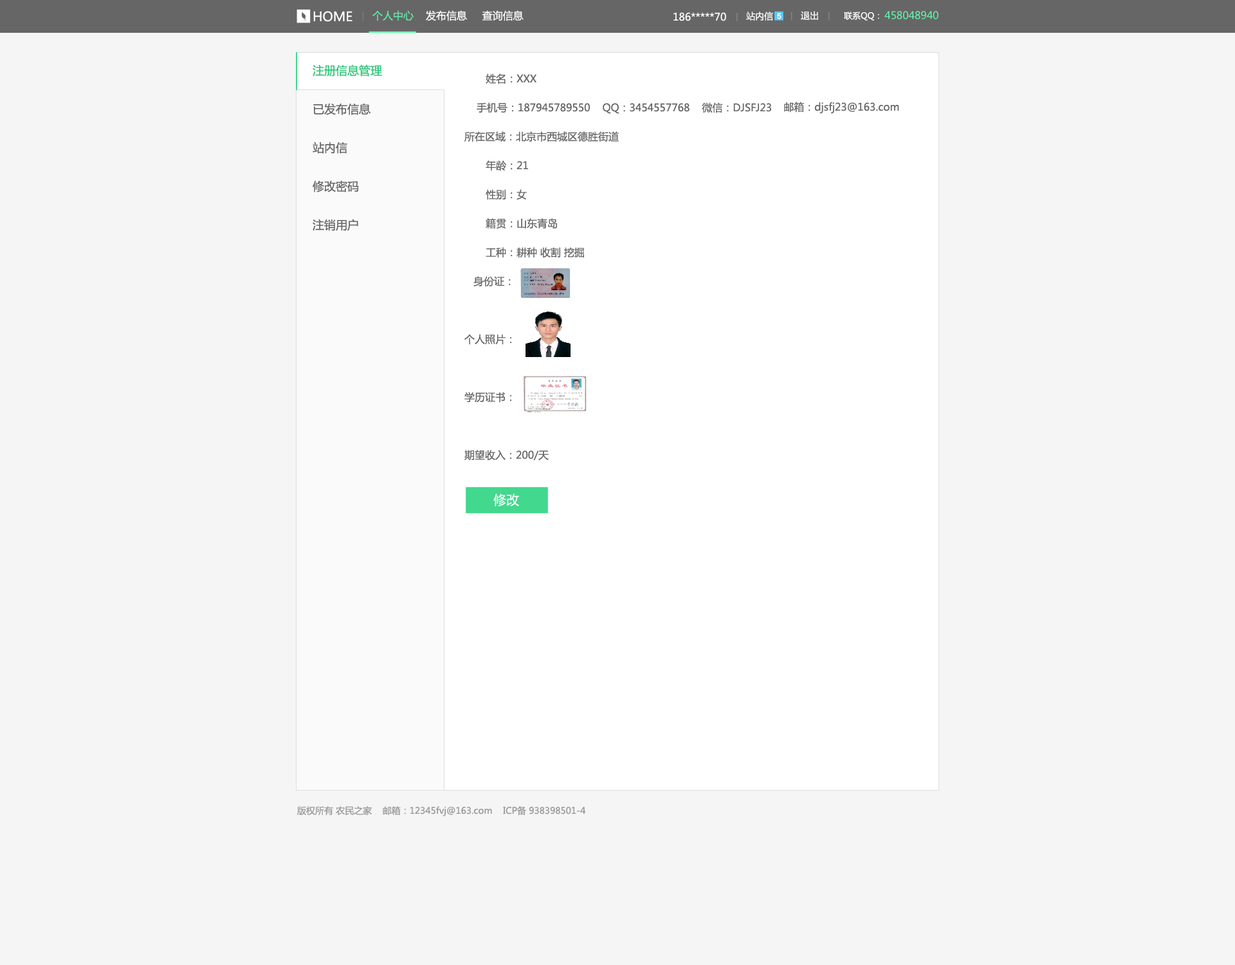
<style>
.page{position:relative;width:1235px;height:965px;background:#f5f5f5}
.page>*{position:absolute;margin:0}
.t1{font:12.9px "MicrosoftYaHei";color:#ffffff;text-transform:uppercase}
.t2{font:10.3px "MicrosoftYaHei";color:#ffffff;text-transform:uppercase}
.t3{font:10.3px "MicrosoftYaHei";color:#61eba6;text-transform:uppercase}
.t4{font:9px "MicrosoftYaHei";color:#ffffff;text-transform:uppercase}
.t5{font:7.7px "ArialMT";color:#ffffff;text-transform:uppercase;font-weight:bold}
.t6{font:8.4px "MicrosoftYaHei";color:#ffffff;text-transform:uppercase}
.t7{font:10.3px "MicrosoftYaHei";color:#60fdaf;text-transform:uppercase}
.t8{font:11.6px/38.6px "MicrosoftYaHei";color:#666666;text-transform:uppercase}
.t9{font:11.6px/38.6px "MicrosoftYaHei";color:#2fc479;text-transform:uppercase}
.t10{font:10.3px/29px "MicrosoftYaHei";color:#666666;text-transform:uppercase}
.t11{font:10.3px "MicrosoftYaHei";color:#666666}
.t12{font:10.3px "MicrosoftYaHei";color:#666666;text-transform:uppercase}
.t13{font:9px "MicrosoftYaHei";color:#999999}
</style>
<div class="page">
<p class="t1" style="left:313px;top:11px;width:40px;height:11px">home</p>
<p class="t2" style="left:373px;top:10px;width:151px;height:11px"><span class="t3">个人中心</span>    发布信息     查询信息</p>
<p class="t2" style="left:674px;top:12px;width:52px;height:9px">186*****70</p>
<p class="t4" style="left:746px;top:12px;width:27px;height:9px">站内信</p>
<p class="t5" style="left:777px;top:13px;width:5px;height:6px">5</p>
<p class="t4" style="left:801px;top:11px;width:17px;height:9px">退出</p>
<p class="t6" style="left:844px;top:12px;width:36px;height:9px">联系qq：</p>
<p class="t7" style="left:885px;top:11px;width:54px;height:8px">458048940</p>
<p class="t8" style="left:313px;top:64px;width:69px;height:167px"><span class="t9">注册信息管理<br></span>已发布信息<br>站内信<br>修改密码<br>注销用户</p>
<p class="t10" style="left:465px;top:73px;width:307px;height:388px">姓名：XXX<br>    手机号：187945789550    qq：3454557768    微信：djsfj23<br>所在区域：北京市西城区德胜街道<br>       年龄：21<br>       性别：女<br>       籍贯：山东青岛<br>       工种：耕种 收割 挖掘<br>   身份证：<br><br>个人照片：<br><br>学历证书：<br><br>期望收入：200/天</p>
<p class="t11" style="left:784px;top:102px;width:116px;height:12px"><span class="t12">   邮箱：</span>djsfj23@163.com</p>
<p class="t1" style="left:494px;top:494px;width:25px;height:12px">修改</p>
<p class="t13" style="left:297px;top:806px;width:289px;height:11px">版权所有 农民之家    邮箱：12345fvj@163.com    ICP备 938398501-4</p>
</div>
